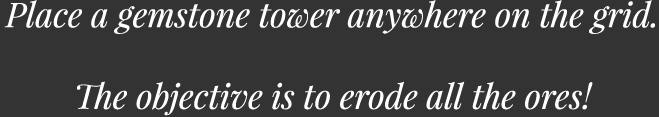
<style>
.page{position:relative;width:659px;height:117px;background:#333333}
.page>*{position:absolute;margin:0}
.t1{font:34px "PlayfairDisplay-Italic";color:#ffffff}
</style>
<div class="page">
<p class="t1" style="left:4px;top:0px;width:651px;height:116px;text-align:center">Place a gemstone tower anywhere on the grid.<br><br>The objective is to erode all the ores!</p>
</div>
